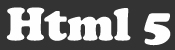
<style>
.page{position:relative;width:175px;height:50px;background:#333333}
.page>*{position:absolute;margin:0}
.t1{font:48px "CooperBlack";color:#fefefe}
</style>
<div class="page">
<p class="t1" style="left:6px;top:7px;width:165px;height:39px">Html 5</p>
</div>
